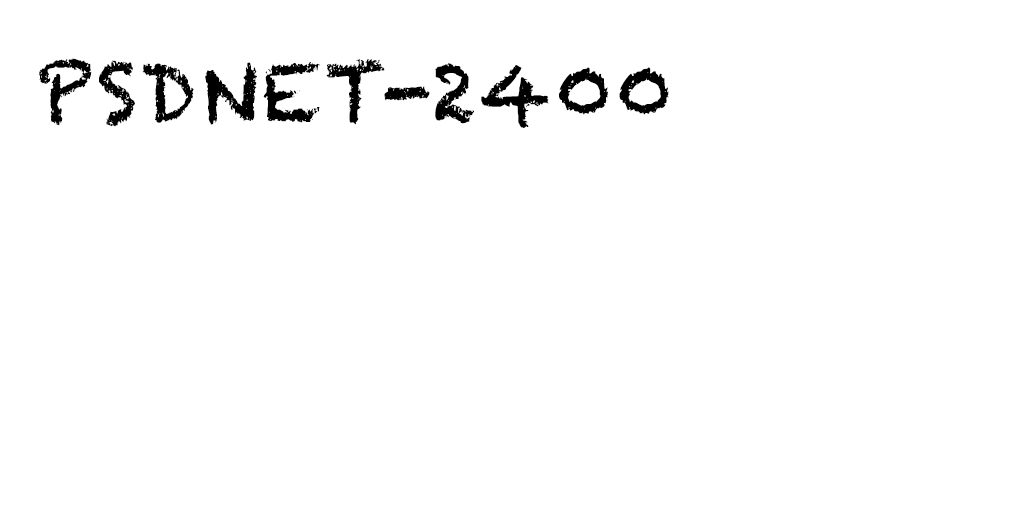
<style>
.page{position:relative;width:1024px;height:512px;background:#ffffff}
.page>*{position:absolute;margin:0}
.t1{font:80px "Chalkduster";letter-spacing:0.05em;color:#000000;text-transform:uppercase}
</style>
<div class="page">
<p class="t1" style="left:39px;top:58px;width:630px;height:71px">PSDNET-2400</p>
</div>
